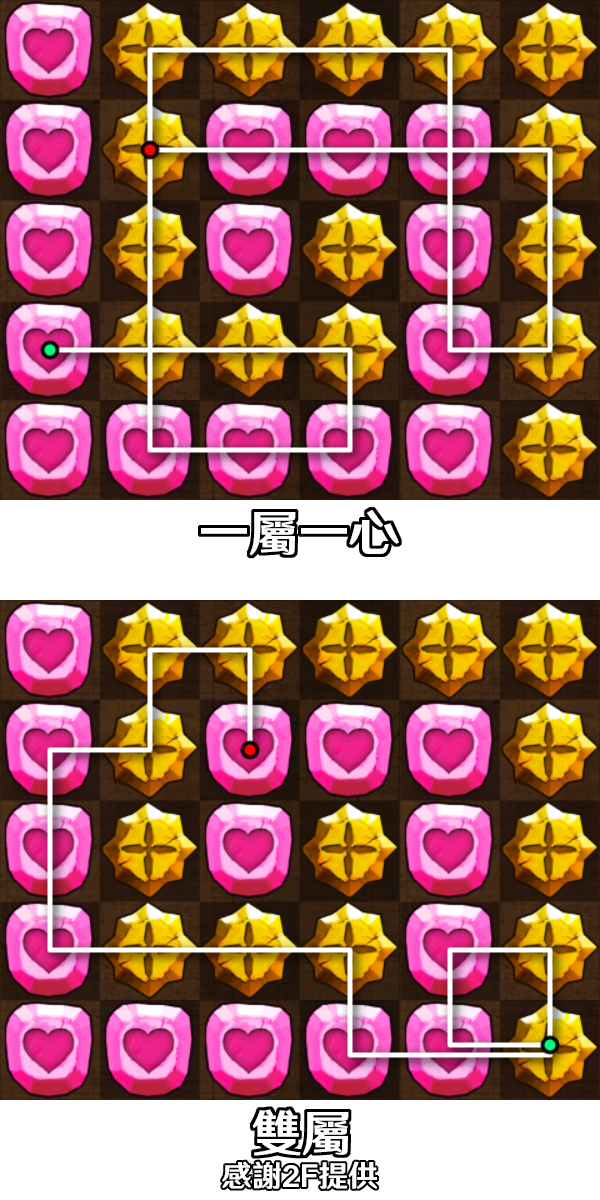
<style>
.page{position:relative;width:600px;height:1200px}
.page>*{position:absolute;margin:0}
.t1{font:50px "HYWenHei-HEW";color:#ffffff}
.t2{font:30px "HYWenHei-HEW";color:#ffffff}
</style>
<div class="page">
<p class="t1" style="left:252px;top:1109px;width:97px;height:47px">雙屬</p>
<p class="t2" style="left:222px;top:1161px;width:156px;height:29px">感謝2F提供</p>
</div>
